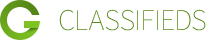
<style>
.page{position:relative;width:220px;height:40px;background:#ffffff}
.page>*{position:absolute;margin:0}
.t1{font:30px "SourceSansPro-ExtraLight";color:#578917;text-transform:uppercase}
</style>
<div class="page">
<p class="t1" style="left:59px;top:9px;width:147px;height:22px">CLASSIFIEDS</p>
</div>
